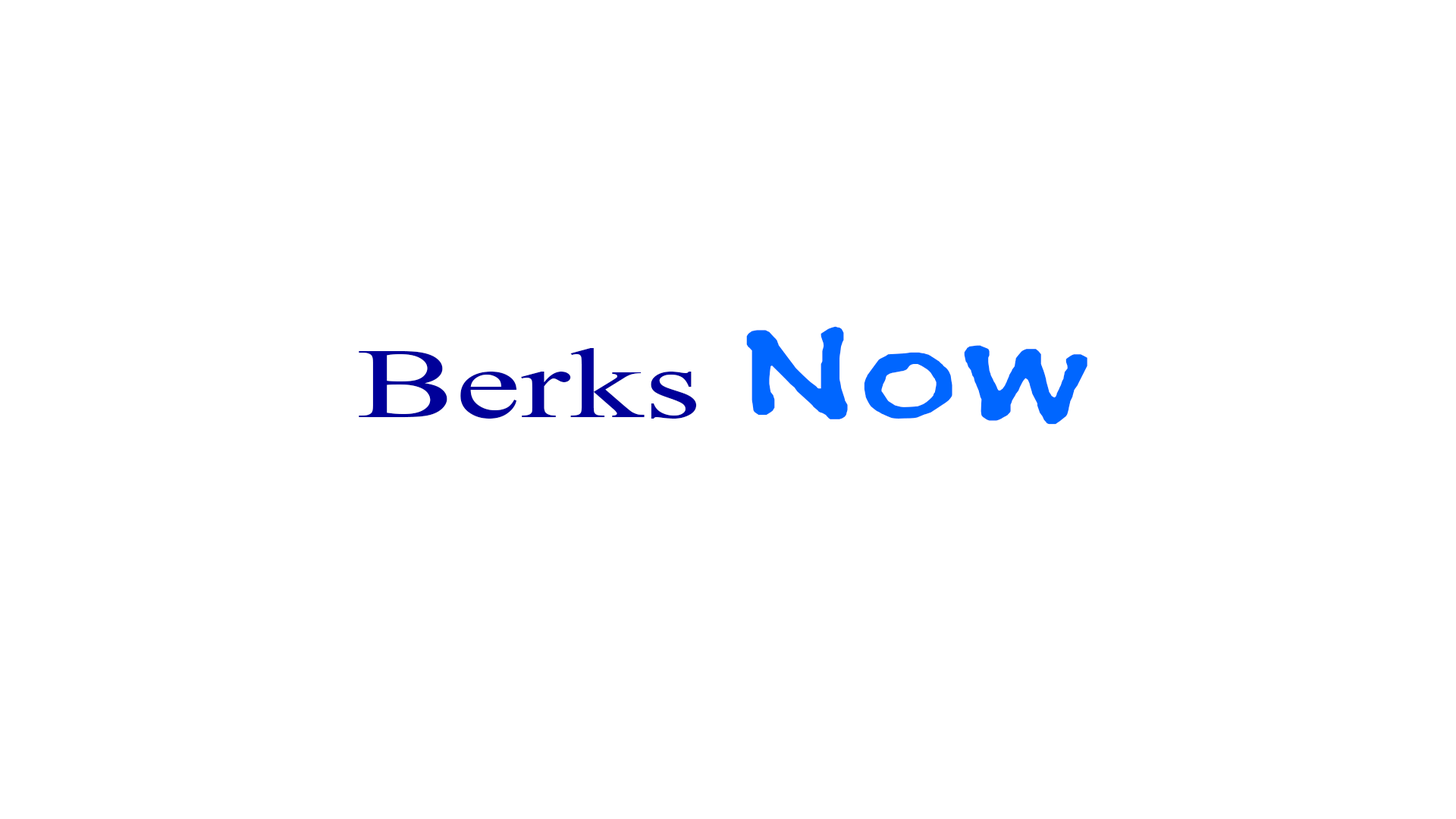
<style>
.page{position:relative;width:1456px;height:819px;background:#ffffff}
.page>*{position:absolute;margin:0}
.t1{font:98.6px "TimesNewRomanPSMT";color:#000099;scale:1.5 1}
.t2{font:151.7px "BuxtonSketch";color:#0066ff;scale:1.5 1}
</style>
<div class="page">
<p class="t1" style="left:359px;top:326px;width:728px;height:99px">Berks <span class="t2">Now</span></p>
</div>
